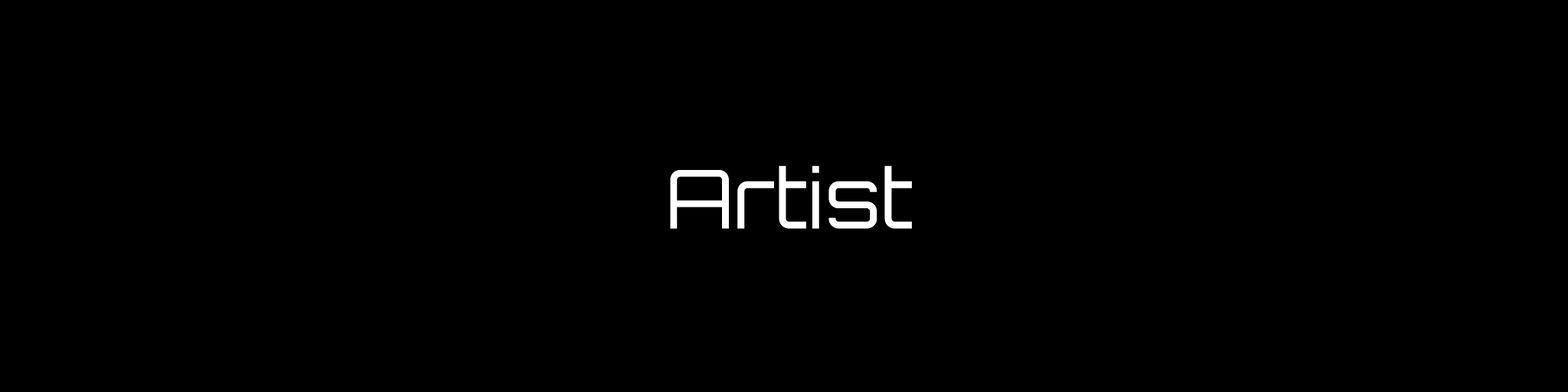
<style>
.page{position:relative;width:1568px;height:392px;background:#000000}
.page>*{position:absolute;margin:0}
.t1{font:81px "Orbitron-Light";color:#ffffff}
</style>
<div class="page">
<p class="t1" style="left:670px;top:165px;width:242px;height:64px">Artist</p>
</div>
